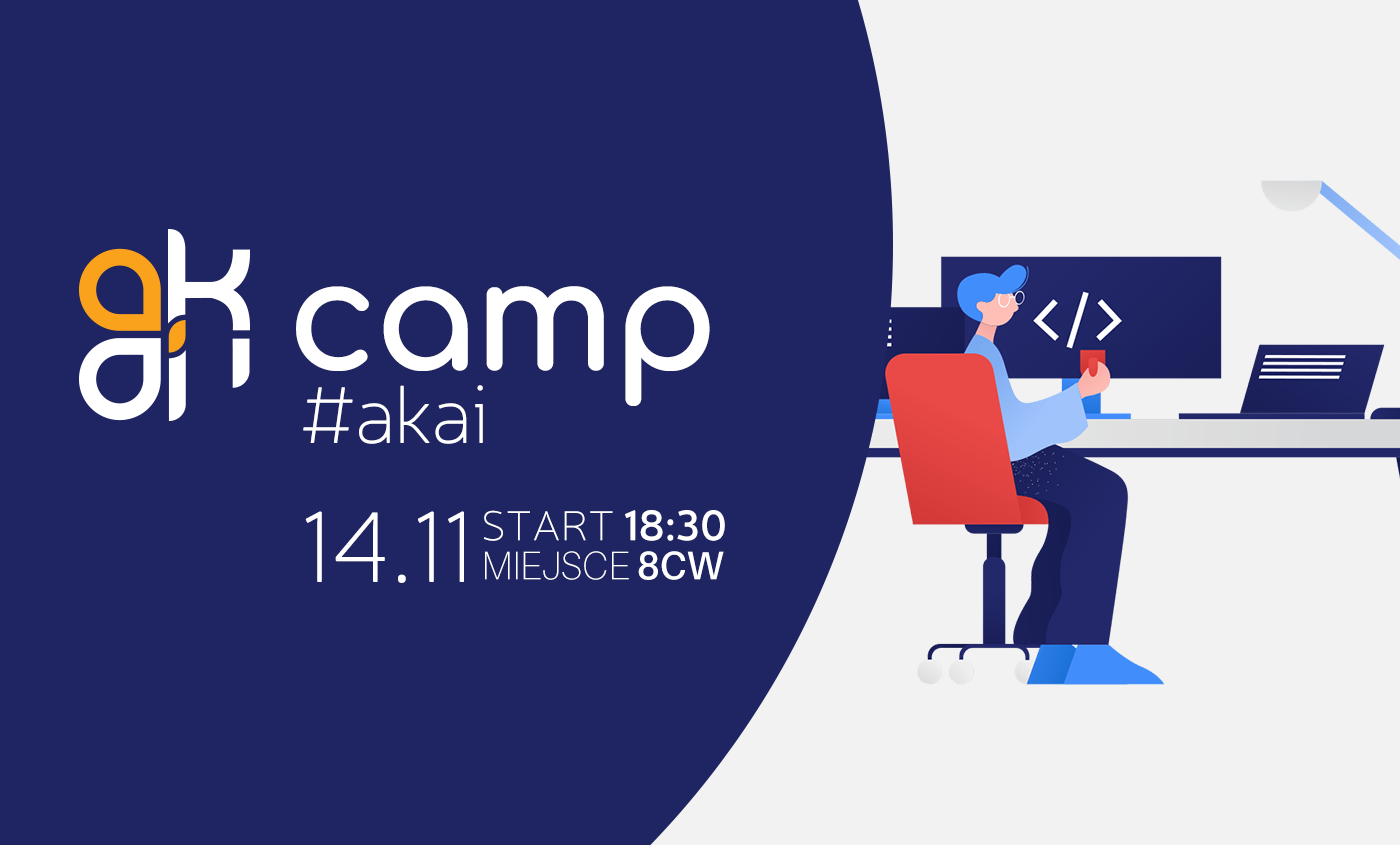
<style>
.page{position:relative;width:1400px;height:845px;background:#1f2462}
.page>*{position:absolute;margin:0}
.t1{font:152.2px "Comfortaa-Bold";letter-spacing:-0.025em;color:#ffffff}
.t2{font:81.7px "Neris-Thin";letter-spacing:-0.025em;color:#ffffff}
.t3{font:42.4px "Neris-Thin";color:#ffffff}
.t4{font:42.4px "Neris-SemiBold";color:#ffffff}
.t5{font:101.5px "Neris-Thin";color:#ffffff}
.t6{font:39.8px "Aileron-Thin";color:#ffffff;scale:0.95 1}
.t7{font:39.8px "Aileron-SemiBold";color:#ffffff;scale:0.95 1}
</style>
<div class="page">
<p class="t1" style="left:296px;top:286px;width:414px;height:120px">camp</p>
<p class="t2" style="left:303px;top:385px;width:180px;height:59px">#akai</p>
<p class="t3" style="left:483px;top:510px;width:242px;height:31px">START <span class="t4">18:30</span></p>
<p class="t5" style="left:305px;top:511px;width:159px;height:72px">14.11</p>
<p class="t6" style="left:485px;top:551px;width:239px;height:29px">MIEJSCE <span class="t7">8CW</span></p>
</div>
